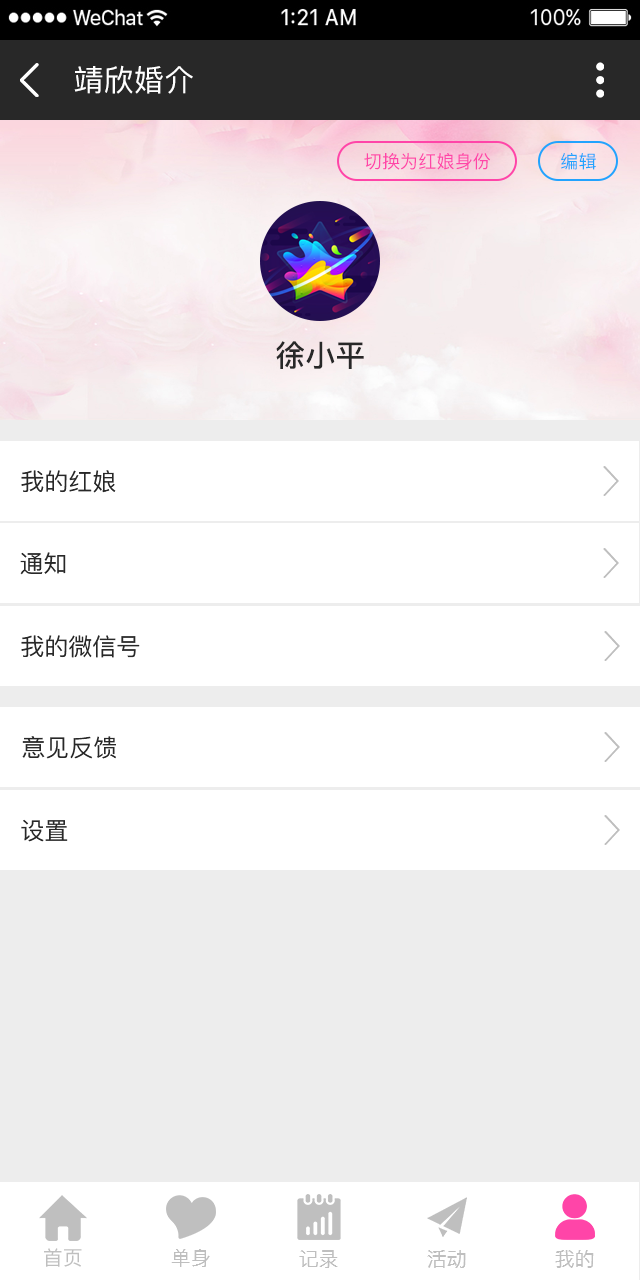
<style>
.page{position:relative;width:640px;height:1280px;background:#ffffff}
.page>*{position:absolute;margin:0}
.t1{font:30px "PingFang-SC-Medium";letter-spacing:0.01em;color:#ffffff;text-transform:uppercase}
.t2{font:18px "PingFang-SC-Medium";letter-spacing:0.01em;color:#ff45a8;text-transform:uppercase}
.t3{font:18px "PingFang-SC-Medium";letter-spacing:0.01em;color:#22a3fe;text-transform:uppercase}
.t4{font:30px "PingFang-SC-Bold";letter-spacing:0.01em;color:#282828;text-transform:uppercase}
.t5{font:24px "PingFang-SC-Medium";color:#282828;text-transform:uppercase}
.t6{font:20px "PingFang-SC-Medium";color:#bfbfbf;text-transform:uppercase}
</style>
<div class="page">
<p class="t1" style="left:74px;top:65px;width:119px;height:29px">靖欣婚介</p>
<p class="t2" style="left:364px;top:153px;width:126px;height:17px">切换为红娘身份</p>
<p class="t3" style="left:561px;top:153px;width:35px;height:17px">编辑</p>
<p class="t4" style="left:276px;top:341px;width:88px;height:28px">徐小平</p>
<p class="t5" style="left:21px;top:470px;width:95px;height:23px">我的红娘</p>
<p class="t5" style="left:20px;top:552px;width:46px;height:23px">通知</p>
<p class="t5" style="left:21px;top:635px;width:119px;height:23px">我的微信号</p>
<p class="t5" style="left:22px;top:736px;width:94px;height:23px">意见反馈</p>
<p class="t5" style="left:21px;top:819px;width:47px;height:23px">设置</p>
<p class="t6" style="left:44px;top:1248px;width:38px;height:19px">首页</p>
<p class="t6" style="left:171px;top:1249px;width:39px;height:18px">单身</p>
<p class="t6" style="left:299px;top:1250px;width:39px;height:18px">记录</p>
<p class="t6" style="left:427px;top:1250px;width:39px;height:18px">活动</p>
<p class="t6" style="left:555px;top:1250px;width:39px;height:18px">我的</p>
</div>
